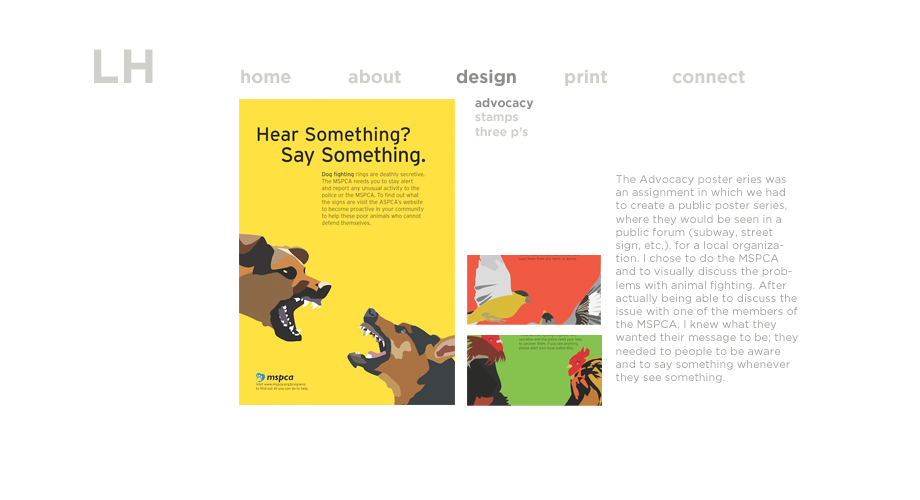
<style>
.page{position:relative;width:920px;height:500px;background:#ffffff}
.page>*{position:absolute;margin:0}
.t1{font:48px "Gotham-Bold";color:#cfd0cc}
.t2{font:18px "Gotham-Bold";color:#cfd0cc}
.t3{font:18px "Gotham-Bold";color:#8e8e8d}
.t4{font:12px "Gotham-Bold";color:#cfd0cc}
.t5{font:12px "Gotham-Bold";color:#8e8e8d}
.t6{font:11px "Gotham-Book";color:#9a9a98}
</style>
<div class="page">
<p class="t1" style="left:94px;top:49px;width:59px;height:34px">LH</p>
<p class="t2" style="left:241px;top:69px;width:504px;height:17px">home  about  <span class="t3">design</span>  print  connect</p>
<p class="t4" style="left:475px;top:98px;width:59px;height:40px"><span class="t5">advocacy<br></span>stamps<br>three p’s</p>
<p class="t6" style="left:616px;top:175px;width:182px;height:208px">The Advocacy poster eries was an assignment in which we had to create a public poster series, where they would be seen in a public forum (subway, street sign, etc.), for a local organization. I chose to do the MSPCA and to visually discuss the problems with animal fighting. After actually being able to discuss the issue with one of the members of the MSPCA, I knew what they wanted their message to be; they needed to people to be aware and to say something whenever they see something.</p>
</div>
